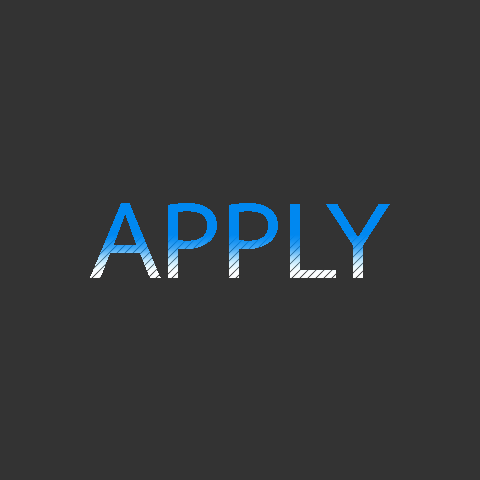
<style>
.page{position:relative;width:480px;height:480px;background:#333333}
.page>*{position:absolute;margin:0}
.t1{font:155.6px "THSarabunPSK-Bold"}
</style>
<div class="page">
<p class="t1" style="left:90px;top:203px;width:300px;height:75px">APPLY</p>
</div>
